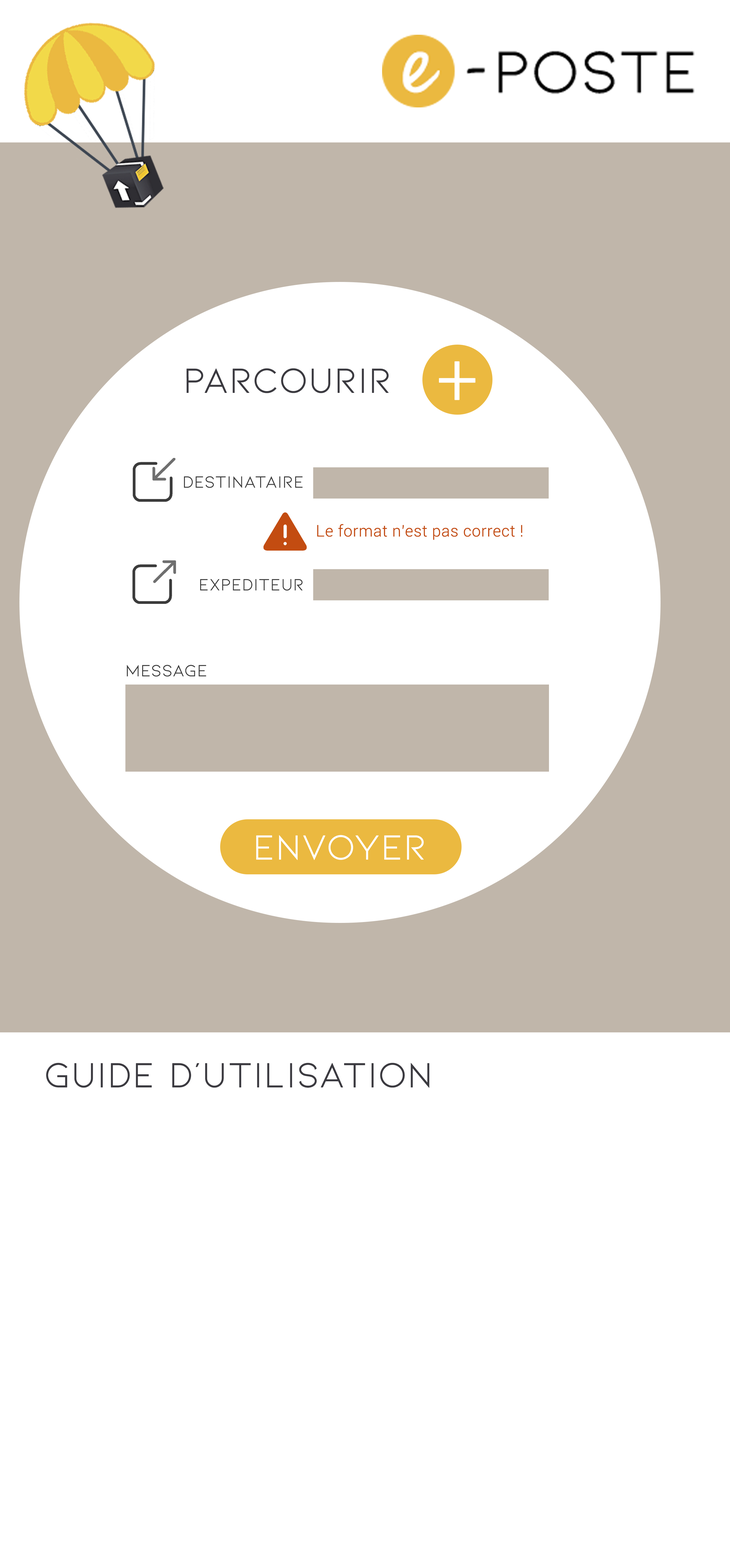
<style>
.page{position:relative;width:730px;height:1568px;background:#ffffff}
.page>*{position:absolute;margin:0}
.t1{font:73.6px "Roboto-Light";color:#ffffff;font-weight:bold}
.t2{font:36.8px "Kiona-Regular";color:#3b3a40;font-weight:bold}
.t3{font:17.2px "Kiona-Regular";color:#3b3b3b;font-weight:bold}
.t4{font:15.9px "Roboto-Light";color:#c34c11;font-weight:bold}
.t5{font:17.2px "Kiona-Regular";color:#3a3a3a;font-weight:bold}
.t6{font:36.8px "Kiona-Regular";color:#ffffff;font-weight:bold}
</style>
<div class="page">
<p class="t1" style="left:439px;top:361px;width:36px;height:39px">+</p>
<p class="t2" style="left:186px;top:368px;width:203px;height:25px">Parcourir</p>
<p class="t3" style="left:184px;top:476px;width:119px;height:12px">destinataire</p>
<p class="t4" style="left:317px;top:524px;width:205px;height:16px">Le format n’est pas correct !</p>
<p class="t5" style="left:200px;top:579px;width:103px;height:12px">EXPEDITEUR</p>
<p class="t5" style="left:127px;top:665px;width:79px;height:12px">MESSAGE</p>
<p class="t6" style="left:256px;top:835px;width:168px;height:25px">ENVOYER</p>
<p class="t2" style="left:46px;top:1063px;width:383px;height:25px">GUIDE D’UTILISATION</p>
</div>
